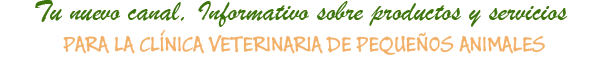
<style>
.page{position:relative;width:600px;height:60px;background:#ffffff}
.page>*{position:absolute;margin:0}
.t1{font:30px "BrushScriptMT";color:#3d740c}
.t2{font:24px "BuxtonSketch";color:#f3b069}
</style>
<div class="page">
<p class="t1" style="left:35px;top:0px;width:533px;height:27px">Tu nuevo canal, Informativo sobre productos y servicios</p>
<p class="t2" style="left:63px;top:29px;width:482px;height:26px">PARA LA CLÍNICA VETERINARIA DE PEQUEÑOS ANIMALES</p>
</div>
